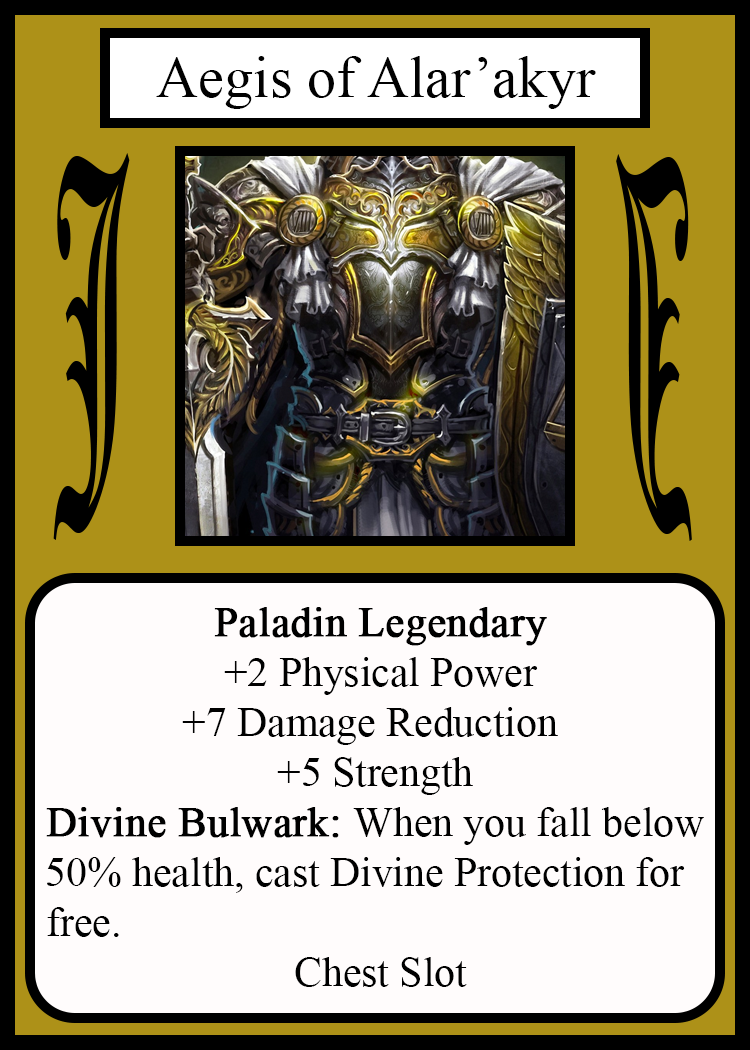
<style>
.page{position:relative;width:750px;height:1050px;background:#fffcfc}
.page>*{position:absolute;margin:0}
.t1{font:58.3px "TimesNewRomanPSMT";color:#010101}
.t2{font:450.1px "OldEnglishTextMT";color:#000000;scale:0.26 1}
.t3{font:449.7px "OldEnglishTextMT";color:#000000;scale:0.26 1}
.t4{font:41.7px "TimesNewRomanPSMT";color:#000000}
.t5{font:41.7px "TimesNewRomanPSMT";color:#000000;font-weight:bold}
</style>
<div class="page">
<p class="t1" style="left:156px;top:56px;width:440px;height:53px">Aegis of Alar’akyr</p>
<p class="t2" style="left:53px;top:153px;width:77px;height:387px">J</p>
<p class="t3" style="left:616px;top:154px;width:76px;height:387px;rotate:180deg">J</p>
<p class="t4" style="left:46px;top:607px;width:658px;height:380px;text-align:center"><span class="t5">Paladin Legendary<br></span> +2 Physical Power<br>+7 Damage Reduction <br>+5 Strength<br><span class="t5">Divine Bulwark: </span>When you fall below<br>50% health, cast Divine Protection for  <br>free.                                                        <br> Chest Slot</p>
</div>
